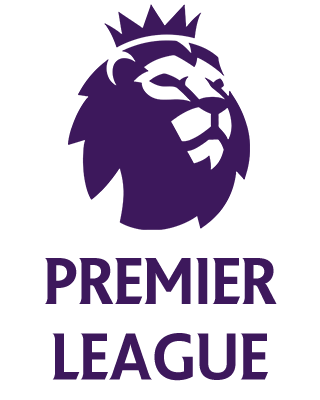
<style>
.page{position:relative;width:320px;height:400px;background:#ffffff}
.page>*{position:absolute;margin:0}
.t1{font:63px "PremierLeague";color:#3d185c}
</style>
<div class="page">
<p class="t1" style="left:45px;top:258px;width:232px;height:123px;text-align:center">Premier league</p>
</div>
